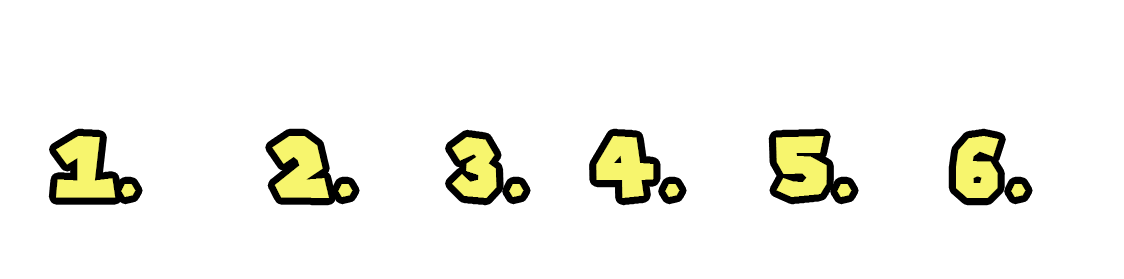
<style>
.page{position:relative;width:1124px;height:279px;background:#ffffff}
.page>*{position:absolute;margin:0}
.t1{font:83.4px "SuperMarioGalaxy";color:#f7f56d}
</style>
<div class="page">
<p class="t1" style="left:56px;top:136px;width:970px;height:62px">1.    2.   3.  4.   5.   6.</p>
</div>
